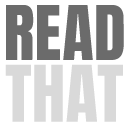
<style>
.page{position:relative;width:128px;height:128px;background:#ffffff}
.page>*{position:absolute;margin:0}
.t1{font:64.1px "Anton-Regular";color:#6b6b6b}
.t2{font:66.3px "Anton-Regular";color:#d9d9d9}
</style>
<div class="page">
<p class="t1" style="left:6px;top:5px;width:118px;height:55px">READ</p>
<p class="t2" style="left:5px;top:64px;width:118px;height:58px">THAT</p>
</div>
